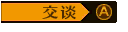
<style>
.page{position:relative;width:128px;height:32px;background:#ffffff}
.page>*{position:absolute;margin:0}
.t1{font:14.7px "SkipStd-B";letter-spacing:0.125em;color:#4c2b02;scale:1.1 1}
.t2{font:14.7px "FZYASHS_ZHONG--GB1-0";letter-spacing:0.125em;color:#4c2b02;scale:1.1 1}
</style>
<div class="page">
<p class="t1" style="left:42px;top:5px;width:34px;height:15px">交<span class="t2">谈</span></p>
</div>
